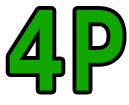
<style>
.page{position:relative;width:129px;height:105px;background:#ffffff}
.page>*{position:absolute;margin:0}
.t1{font:100px "HGPSoeiKakugothicUB";letter-spacing:0.05em;color:#11a600}
</style>
<div class="page">
<p class="t1" style="left:9px;top:10px;width:114px;height:81px">4P</p>
</div>
